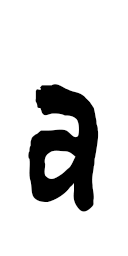
<style>
.page{position:relative;width:128px;height:256px;background:#ffffff}
.page>*{position:absolute;margin:0}
.t1{font:250px "AB-fudeshichi";letter-spacing:0.42em;color:#000000;scale:0.7 1}
</style>
<div class="page">
<p class="t1" style="left:28px;top:84px;width:71px;height:128px">a</p>
</div>
